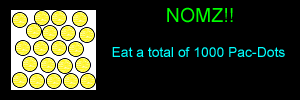
<style>
.page{position:relative;width:300px;height:100px;background:#000000}
.page>*{position:absolute;margin:0}
.t1{font:19.4px "ArialMT";color:#00ff00}
.t2{font:13.9px "ArialMT";color:#00ffff}
</style>
<div class="page">
<p class="t1" style="left:167px;top:7px;width:66px;height:16px">NOMZ!!</p>
<p class="t2" style="left:112px;top:47px;width:173px;height:10px">Eat a total of 1000 Pac-Dots</p>
</div>
